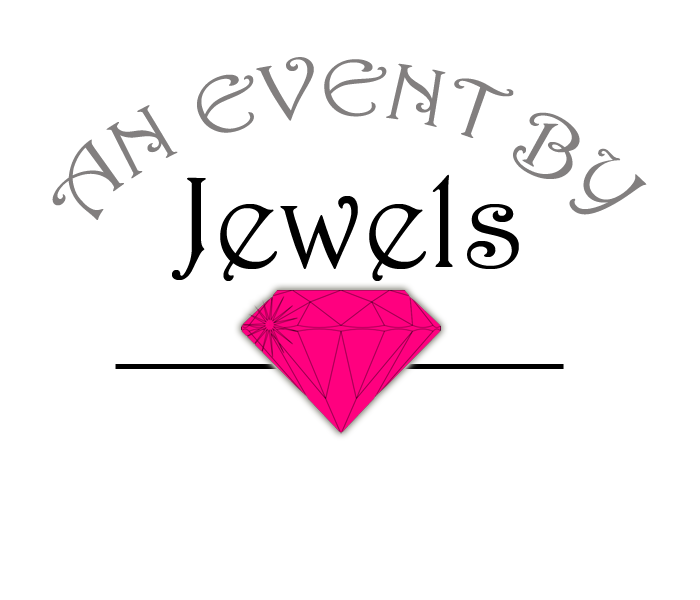
<style>
.page{position:relative;width:700px;height:600px;background:#ffffff}
.page>*{position:absolute;margin:0}
.t1{font:80px "Harrington";color:#827f7f}
.t2{font:130px "Harrington";color:#000000}
</style>
<div class="page">
<p class="t1" style="left:52px;top:57px;width:595px;height:163px;text-align:center">AN EVENT BY</p>
<p class="t2" style="left:172px;top:174px;width:347px;height:107px">Jewels</p>
</div>
